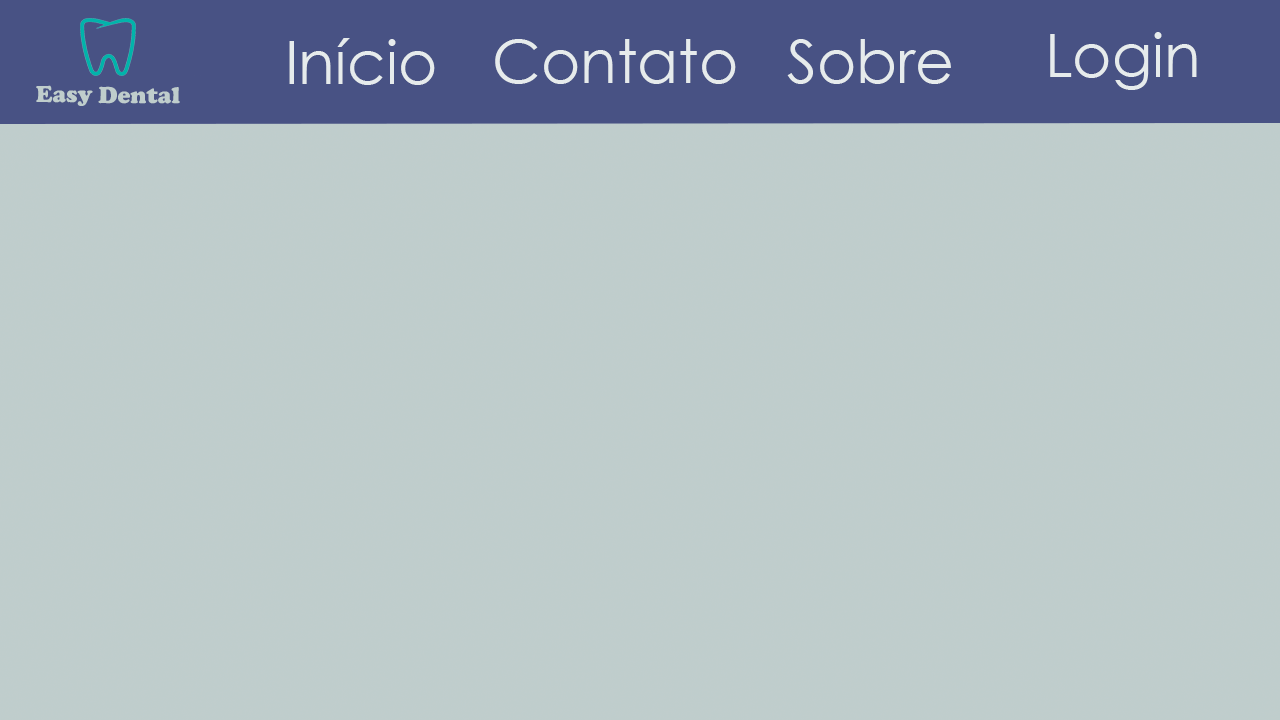
<style>
.page{position:relative;width:1280px;height:720px;background:#bfcdcc}
.page>*{position:absolute;margin:0}
.t1{font:60px "CenturyGothic";color:#e6ebec}
.t2{font:24px "CooperBlack";color:#bfcdcc}
</style>
<div class="page">
<p class="t1" style="left:289px;top:38px;width:146px;height:47px">Início</p>
<p class="t1" style="left:495px;top:39px;width:241px;height:45px">Contato</p>
<p class="t1" style="left:787px;top:39px;width:164px;height:45px">Sobre</p>
<p class="t1" style="left:1050px;top:32px;width:147px;height:58px">Login</p>
<p class="t2" style="left:36px;top:85px;width:144px;height:21px;rotate:1deg">Easy Dental</p>
</div>
